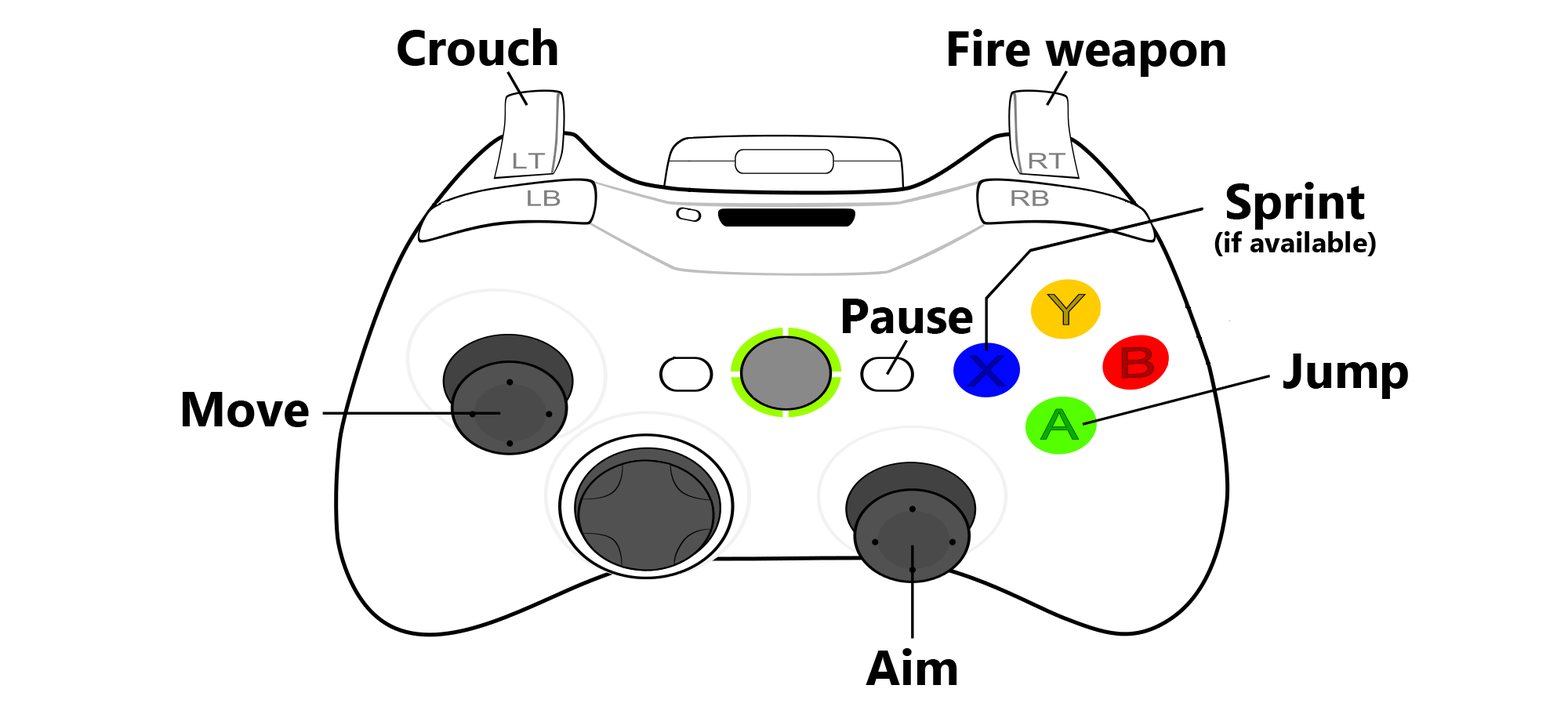
<style>
.page{position:relative;width:1568px;height:725px;background:#ffffff}
.page>*{position:absolute;margin:0}
.t1{font:49.4px "MyanmarText-Bold";color:#000000}
.t2{font:28.2px "MyanmarText-Bold";color:#000000}
</style>
<div class="page">
<p class="t1" style="left:397px;top:28px;width:160px;height:38px">Crouch</p>
<p class="t1" style="left:949px;top:29px;width:276px;height:48px">Fire weapon</p>
<p class="t2" style="left:1214px;top:182px;width:162px;height:74px;text-align:center"><span class="t1">Sprint<br></span>(if available)</p>
<p class="t1" style="left:843px;top:299px;width:130px;height:35px">Pause</p>
<p class="t1" style="left:1283px;top:354px;width:125px;height:45px">Jump</p>
<p class="t1" style="left:183px;top:392px;width:126px;height:35px">Move</p>
<p class="t1" style="left:866px;top:648px;width:91px;height:37px">Aim</p>
</div>
